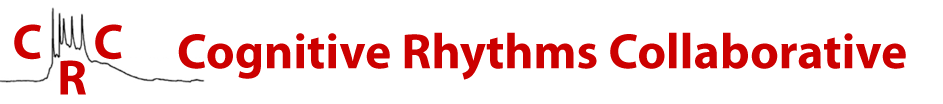
<style>
.page{position:relative;width:943px;height:104px;background:#ffffff}
.page>*{position:absolute;margin:0}
.t1{font:50px "MyriadPro-Bold";color:#cc0000}
</style>
<div class="page">
<p class="t1" style="left:14px;top:24px;width:27px;height:36px">C</p>
<p class="t1" style="left:95px;top:24px;width:27px;height:36px">C</p>
<p class="t1" style="left:178px;top:32px;width:728px;height:48px">Cognitive Rhythms Collaborative</p>
<p class="t1" style="left:60px;top:60px;width:26px;height:35px">R</p>
</div>
